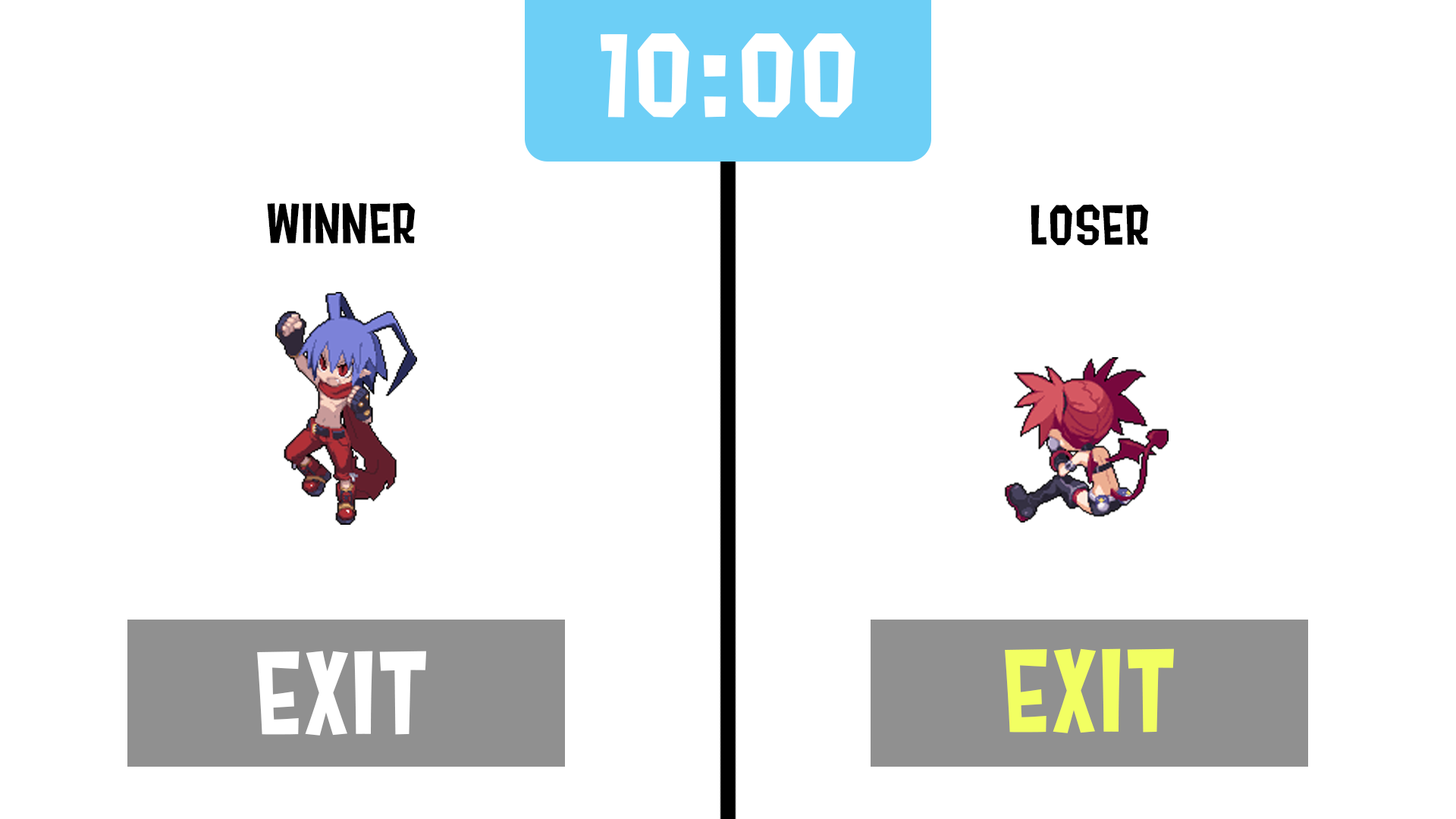
<style>
.page{position:relative;width:1456px;height:819px;background:#ffffff}
.page>*{position:absolute;margin:0}
.t1{font:113.7px "Splat2K";color:#ffffff}
.t2{font:54.6px "Splat2K";color:#000000}
.t3{font:113.7px "Splat2K";color:#f2ff62}
</style>
<div class="page">
<p class="t1" style="left:601px;top:33px;width:254px;height:85px">10:00</p>
<p class="t2" style="left:267px;top:202px;width:149px;height:41px">WINNER</p>
<p class="t2" style="left:1031px;top:204px;width:118px;height:42px">LOSER</p>
<p class="t1" style="left:257px;top:651px;width:169px;height:85px">EXIT</p>
<p class="t3" style="left:1005px;top:648px;width:169px;height:85px">EXIT</p>
</div>
